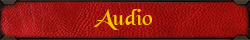
<style>
.page{position:relative;width:250px;height:40px}
.page>*{position:absolute;margin:0}
.t1{font:24px "BlackChancery";color:#f6c503}
</style>
<div class="page">
<p class="t1" style="left:94px;top:9px;width:58px;height:21px">Audio</p>
</div>
